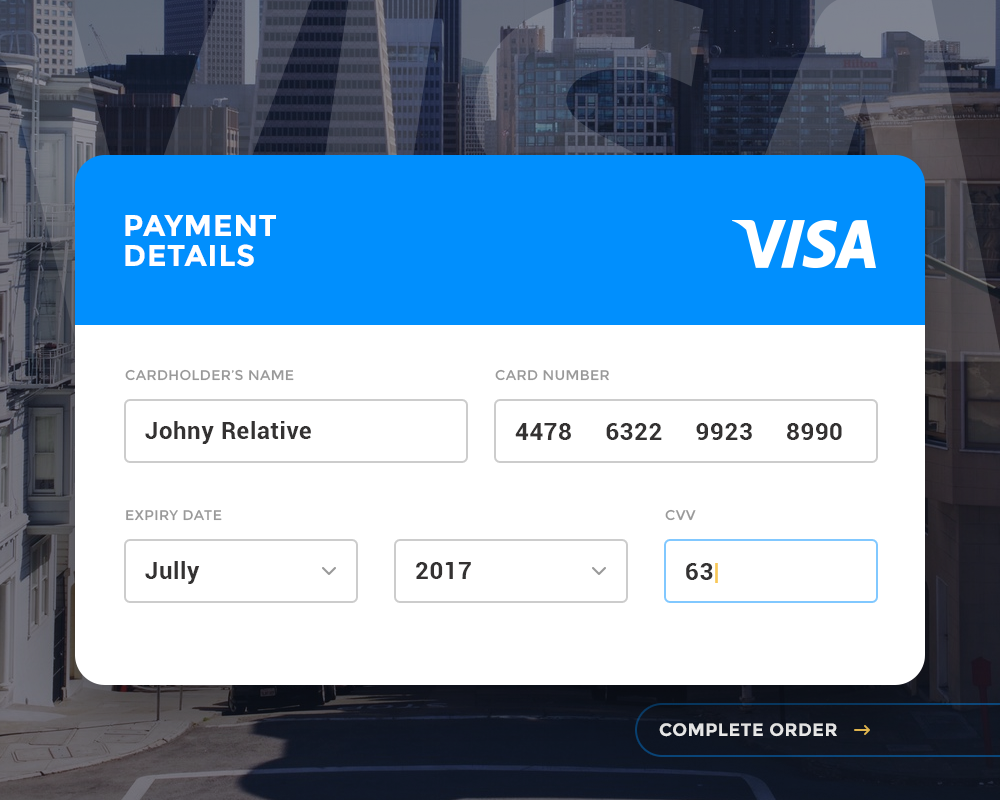
<style>
.page{position:relative;width:1000px;height:800px;background:#ffffff}
.page>*{position:absolute;margin:0}
.t1{font:30px/30px "Montserrat-Bold";letter-spacing:0.025em;color:#ffffff;text-transform:uppercase}
.t2{font:14px "Montserrat-Regular";letter-spacing:0.025em;color:#999999;text-transform:uppercase}
.t3{font:24px "Roboto-Bold";letter-spacing:0.025em;color:#343232}
.t4{font:24px "Roboto-Bold";letter-spacing:0.025em;color:#f8c856}
.t5{font:18px "Montserrat-Bold";letter-spacing:0.025em;color:#e4e4e4;text-transform:uppercase}
</style>
<div class="page">
<p class="t1" style="left:125px;top:215px;width:151px;height:52px">Payment <br>Details</p>
<p class="t2" style="left:125px;top:369px;width:169px;height:12px">Cardholder’s name</p>
<p class="t2" style="left:495px;top:369px;width:114px;height:12px">Card Number</p>
<p class="t3" style="left:145px;top:421px;width:166px;height:23px">Johny Relative</p>
<p class="t3" style="left:515px;top:423px;width:327px;height:17px">4478     6322     9923     8990</p>
<p class="t2" style="left:126px;top:510px;width:96px;height:11px">expiry date</p>
<p class="t2" style="left:665px;top:509px;width:31px;height:12px">CVV</p>
<p class="t3" style="left:145px;top:561px;width:55px;height:23px">Jully</p>
<p class="t3" style="left:416px;top:562px;width:55px;height:17px">2017</p>
<p class="t3" style="left:686px;top:563px;width:32px;height:20px">63<span class="t4">|</span></p>
<p class="t5" style="left:659px;top:723px;width:178px;height:14px">complete order</p>
</div>
